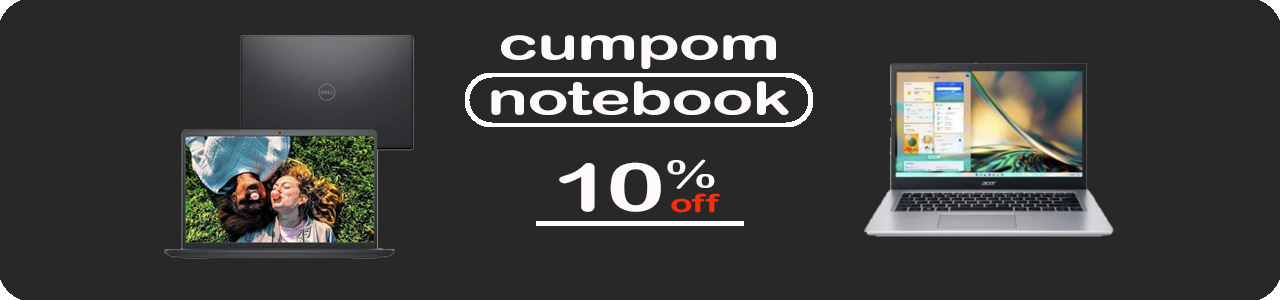
<style>
.page{position:relative;width:1280px;height:300px;background:#282828}
.page>*{position:absolute;margin:0}
.t1{font:45.8px "ArialRoundedMTBold";color:#fffafa;scale:1.5 1}
.t2{font:66.7px "ArialRoundedMTBold";color:#fffafa;scale:1.5 1}
.t3{font:25px "ArialRoundedMTBold";color:#fc2b0b;scale:1.5 1}
</style>
<div class="page">
<p class="t1" style="left:491px;top:35px;width:298px;height:80px;text-align:center">cumpom<br>notebook</p>
<p class="t2" style="left:559px;top:159px;width:156px;height:53px">10%</p>
<p class="t3" style="left:671px;top:193px;width:50px;height:20px">off</p>
</div>
